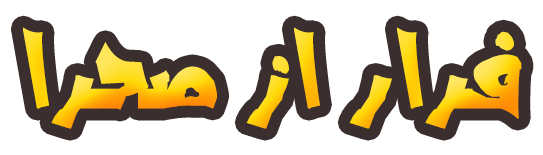
<style>
.page{position:relative;width:543px;height:155px;background:#ffffff}
.page>*{position:absolute;margin:0}
.t1{font:100px "AAref_graffiti"}
</style>
<div class="page">
<p class="t1" style="left:23px;top:27px;width:499px;height:102px">فرار از صحرا</p>
</div>
